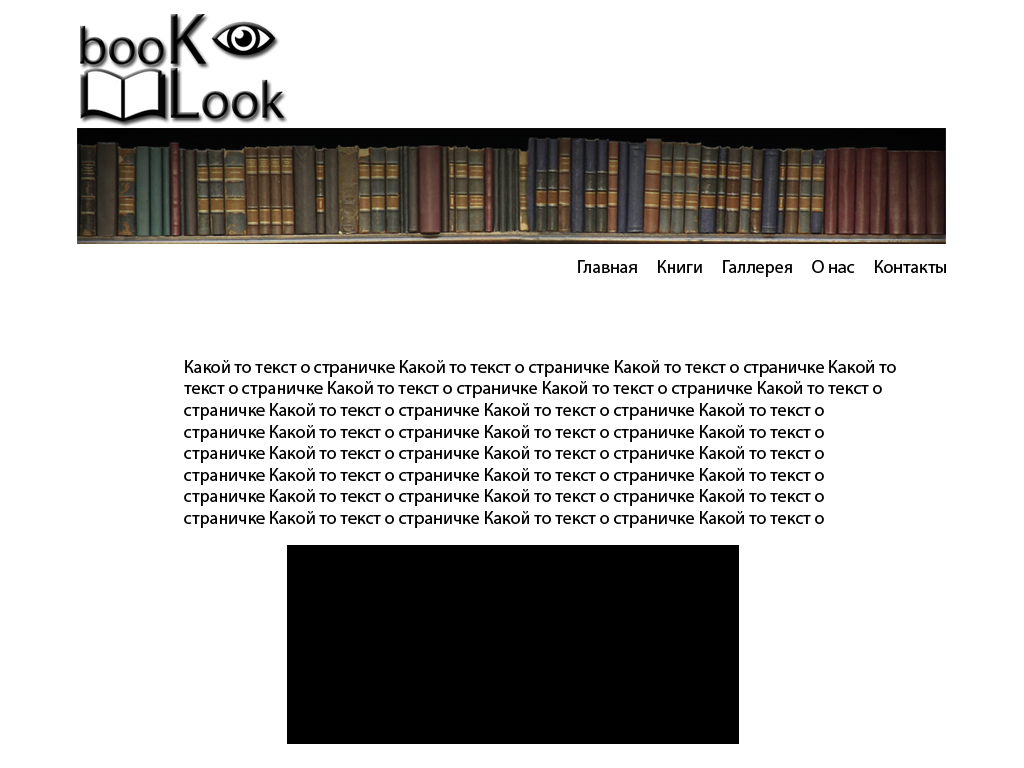
<style>
.page{position:relative;width:1024px;height:768px;background:#ffffff}
.page>*{position:absolute;margin:0}
.t1{font:18px "MyriadPro-Regular";color:#000000}
</style>
<div class="page">
<p class="t1" style="left:578px;top:260px;width:368px;height:17px">Главная     Книги     Галлерея     О нас     Контакты</p>
<p class="t1" style="left:184px;top:360px;width:712px;height:168px">Какой то текст о страничке Какой то текст о страничке Какой то текст о страничке Какой то текст о страничке Какой то текст о страничке Какой то текст о страничке Какой то текст о страничке Какой то текст о страничке Какой то текст о страничке Какой то текст о страничке Какой то текст о страничке Какой то текст о страничке Какой то текст о страничке Какой то текст о страничке Какой то текст о страничке Какой то текст о страничке Какой то текст о страничке Какой то текст о страничке Какой то текст о страничке Какой то текст о страничке Какой то текст о страничке Какой то текст о страничке Какой то текст о страничке Какой то текст о страничке Какой то текст о страничке Какой то текст о страничке</p>
</div>
